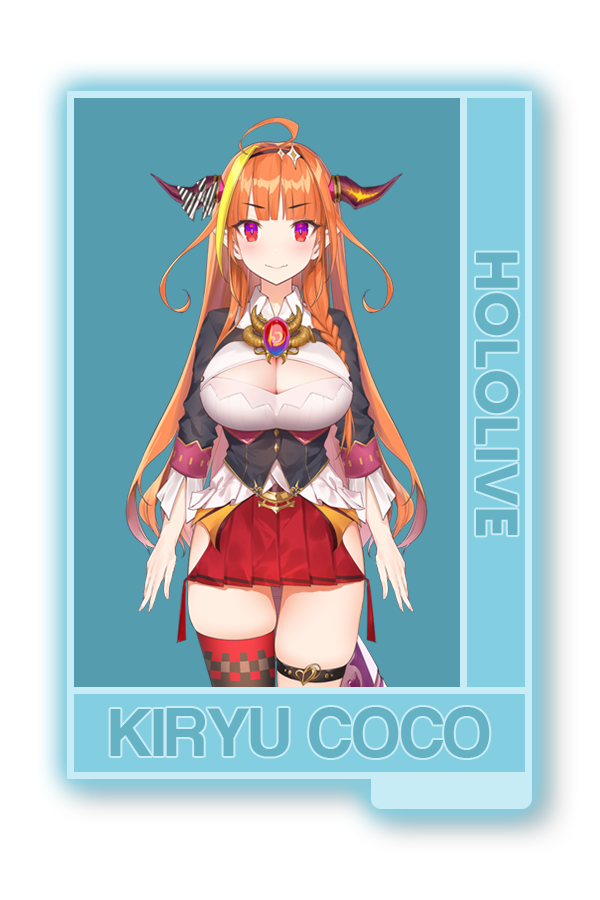
<style>
.page{position:relative;width:600px;height:900px;background:#549cae}
.page>*{position:absolute;margin:0}
.t1{font:59.2px "MADETOMMY-Bold";color:#66b2c5}
.t2{font:71.2px "CoolveticaRg-Regular";color:#66b2c5}
</style>
<div class="page">
<p class="t1" style="left:475px;top:252px;width:44px;height:284px;rotate:90deg">HOLOLIVE</p>
<p class="t2" style="left:110px;top:707px;width:380px;height:51px">KIRYU COCO</p>
</div>
